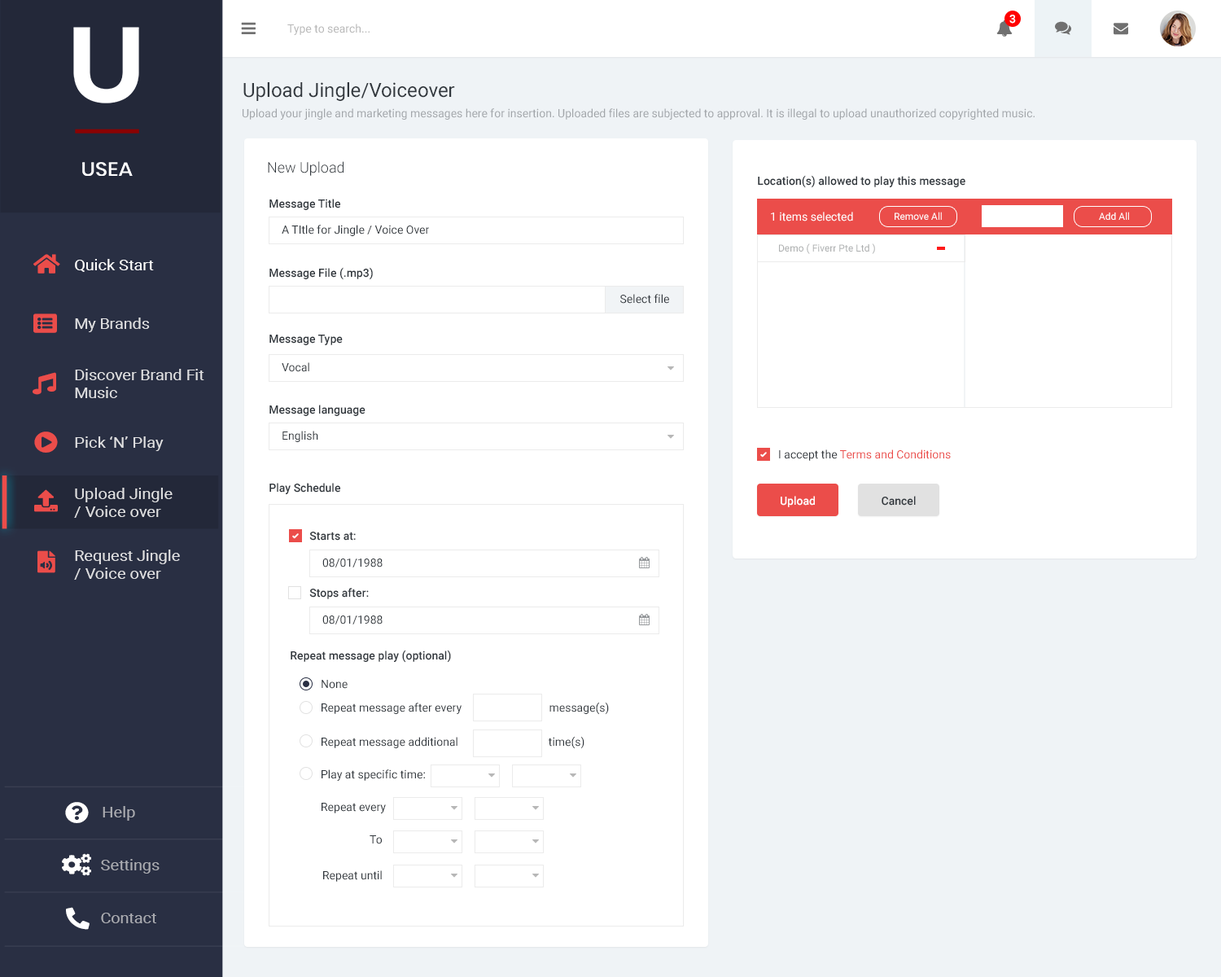
<style>
.page{position:relative;width:1221px;height:977px;background:#ffffff}
.page>*{position:absolute;margin:0}
.t1{font:11.4px "Roboto-Medium";color:#ffffff}
.t2{font:11.4px "Roboto-Regular";color:#b7b7b7}
.t3{font:19.5px "Roboto-Regular";color:#31373d}
.t4{font:11.4px "Roboto-Regular";color:#a2a6aa}
.t5{font:14.7px "Roboto-Light";color:#31373d}
.t6{font:11.4px "Roboto-Medium";color:#31373d}
.t7{font:11.4px "Roboto-Regular";color:#ffffff}
.t8{font:9.8px "Roboto-Regular";color:#ffffff}
.t9{font:11.4px "Roboto-Regular";color:#31373d}
.t10{font:9.8px "Roboto-Regular";color:#acaeaf}
.t11{font:14.9px "Roboto-Regular";color:#ffffff;scale:1.09 1}
.t12{font:14.9px "Roboto-Regular";color:#e0e0e2;scale:1.09 1}
.t13{font:11.4px "Roboto-Regular";color:#eb4d4a}
.t14{font:14.9px "Roboto-Regular";color:#dfe0e1;scale:1.09 1}
.t15{font:15px "Roboto-Regular";color:#abacb2;scale:1.08 1}
</style>
<div class="page">
<p class="t1" style="left:1009px;top:15px;width:7px;height:9px">3</p>
<p class="t2" style="left:287px;top:24px;width:83px;height:11px">Type to search...</p>
<p class="t3" style="left:243px;top:82px;width:212px;height:19px">Upload Jingle/Voiceover</p>
<p class="t4" style="left:243px;top:108px;width:791px;height:12px">Upload your jingle and marketing messages here for insertion. Uploaded files are subjected to approval. It is illegal to upload unauthorized copyrighted music.</p>
<p class="t5" style="left:268px;top:161px;width:75px;height:15px">New Upload</p>
<p class="t6" style="left:758px;top:175px;width:207px;height:13px">Location(s) allowed to play this message</p>
<p class="t6" style="left:269px;top:199px;width:71px;height:11px">Message Title</p>
<p class="t7" style="left:771px;top:212px;width:82px;height:9px">1 items selected</p>
<p class="t8" style="left:894px;top:212px;width:48px;height:8px">Remove All</p>
<p class="t8" style="left:1099px;top:212px;width:30px;height:8px">Add All</p>
<p class="t9" style="left:282px;top:225px;width:147px;height:11px">A TItle for Jingle / Voice Over</p>
<p class="t10" style="left:779px;top:243px;width:96px;height:11px">Demo ( Fiverr Pte Ltd )</p>
<p class="t11" style="left:75px;top:259px;width:79px;height:13px">Quick Start</p>
<p class="t6" style="left:269px;top:267px;width:104px;height:13px">Message File (.mp3)</p>
<p class="t9" style="left:620px;top:294px;width:49px;height:10px">Select file</p>
<p class="t12" style="left:75px;top:317px;width:75px;height:15px">My Brands</p>
<p class="t6" style="left:269px;top:335px;width:74px;height:10px">Message Type</p>
<p class="t9" style="left:282px;top:362px;width:27px;height:10px">Vocal</p>
<p class="t12" style="left:75px;top:369px;width:129px;height:29px">Discover Brand Fit <br>Music</p>
<p class="t6" style="left:269px;top:405px;width:96px;height:11px">Message language</p>
<p class="t12" style="left:75px;top:436px;width:89px;height:15px">Pick ‘N’ Play</p>
<p class="t9" style="left:282px;top:431px;width:36px;height:11px">English</p>
<p class="t13" style="left:779px;top:449px;width:172px;height:12px"><span class="t9">I accept the </span>Terms and Conditions</p>
<p class="t6" style="left:269px;top:483px;width:71px;height:11px">Play Schedule</p>
<p class="t14" style="left:74px;top:488px;width:99px;height:30px">Upload Jingle<br>/ Voice over</p>
<p class="t1" style="left:781px;top:496px;width:34px;height:11px">Upload</p>
<p class="t6" style="left:881px;top:496px;width:35px;height:9px">Cancel</p>
<p class="t6" style="left:309px;top:531px;width:47px;height:9px">Starts at:</p>
<p class="t12" style="left:74px;top:549px;width:106px;height:31px">Request Jingle<br>/ Voice over</p>
<p class="t9" style="left:322px;top:558px;width:61px;height:9px">08/01/1988</p>
<p class="t6" style="left:309px;top:588px;width:60px;height:11px">Stops after:</p>
<p class="t9" style="left:322px;top:615px;width:61px;height:9px">08/01/1988</p>
<p class="t6" style="left:291px;top:650px;width:160px;height:13px">Repeat message play (optional)</p>
<p class="t9" style="left:321px;top:680px;width:27px;height:9px">None</p>
<p class="t9" style="left:321px;top:702px;width:288px;height:13px">Repeat message after every                               message(s)</p>
<p class="t9" style="left:321px;top:736px;width:263px;height:13px">Repeat message additional                                time(s)</p>
<p class="t9" style="left:321px;top:769px;width:104px;height:12px">Play at specific time:</p>
<p class="t15" style="left:103px;top:806px;width:32px;height:14px">Help</p>
<p class="t9" style="left:321px;top:803px;width:65px;height:10px">Repeat every</p>
<p class="t9" style="left:370px;top:835px;width:12px;height:9px">To</p>
<p class="t15" style="left:101px;top:859px;width:59px;height:14px">Settings</p>
<p class="t9" style="left:323px;top:870px;width:59px;height:11px">Repeat until</p>
<p class="t15" style="left:101px;top:912px;width:55px;height:11px">Contact</p>
</div>
